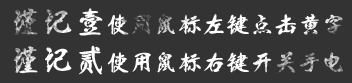
<style>
.page{position:relative;width:352px;height:83px;background:#333333}
.page>*{position:absolute;margin:0}
.t1{font:24px "HDZK--HSJHDTJ-01";color:#ffffff}
.t2{font:32px "HDZK--HSJHDTJ-01";color:#ffffff}
</style>
<div class="page">
<p class="t1" style="left:13px;top:8px;width:330px;height:67px"><span class="t2">谨记壹</span>使用鼠标左键点击黄字<br><span class="t2">谨记贰</span>使用鼠标右键开关手电</p>
</div>
